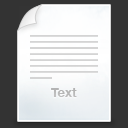
<style>
.page{position:relative;width:128px;height:128px;background:#333333}
.page>*{position:absolute;margin:0}
.t1{font:13px "HelveticaNeue-Bold";color:#cccccc}
</style>
<div class="page">
<p class="t1" style="left:51px;top:88px;width:26px;height:9px">Text</p>
</div>
